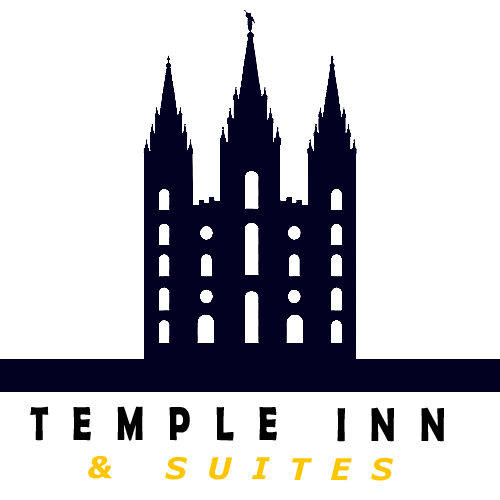
<style>
.page{position:relative;width:500px;height:500px;background:#ffffff}
.page>*{position:absolute;margin:0}
.t1{font:48px "BerlinSansFBDemi-Bold";letter-spacing:0.7em;color:#020202;scale:0.72 1}
.t2{font:30px "Verdana-BoldItalic";letter-spacing:0.7em;color:#fec601}
</style>
<div class="page">
<p class="t1" style="left:30px;top:406px;width:414px;height:36px">TEMPLE INN</p>
<p class="t2" style="left:88px;top:455px;width:305px;height:26px">&amp; SUITES</p>
</div>
